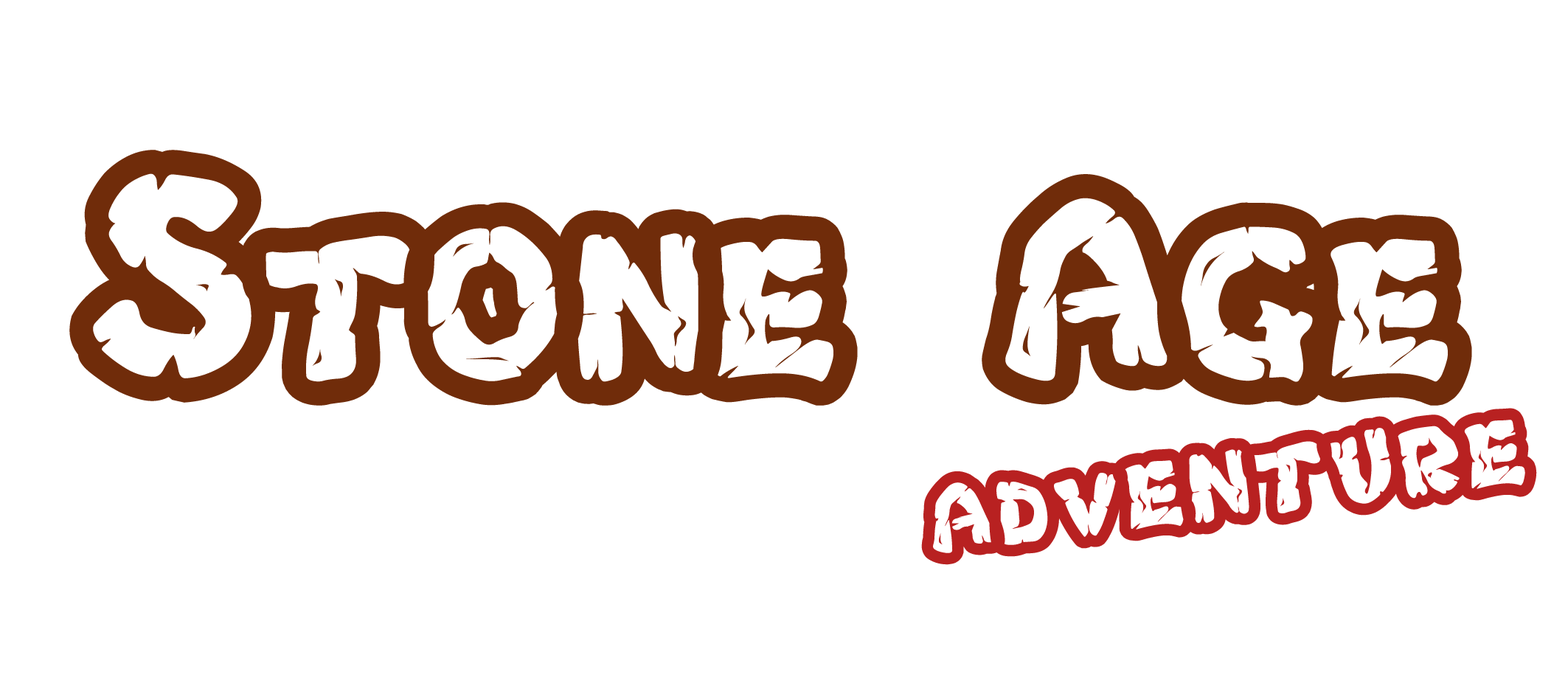
<style>
.page{position:relative;width:1568px;height:697px;background:#ffffff}
.page>*{position:absolute;margin:0}
.t1{font:304.5px "Chlorinar-Regular";color:#702c0a}
.t2{font:143.7px "Chlorinar-Regular";color:#b82121}
</style>
<div class="page">
<p class="t1" style="left:69px;top:150px;width:1403px;height:256px">Stone Age</p>
<p class="t2" style="left:921px;top:408px;width:616px;height:157px;rotate:-7deg">adventure</p>
</div>
